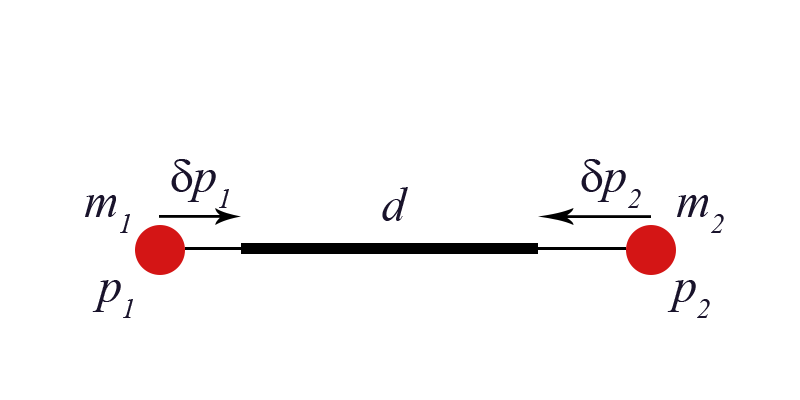
<style>
.page{position:relative;width:800px;height:400px;background:#ffffff}
.page>*{position:absolute;margin:0}
.t1{font:48px "TimesNewRomanPS-ItalicMT";color:#19132b}
.t2{font:48px "SymbolMT";color:#19132b}
</style>
<div class="page">
<p class="t1" style="left:171px;top:159px;width:58px;height:49px"><span class="t2">d</span>p1</p>
<p class="t1" style="left:581px;top:159px;width:60px;height:49px"><span class="t2">d</span>p2</p>
<p class="t1" style="left:85px;top:195px;width:45px;height:38px">m1</p>
<p class="t1" style="left:382px;top:187px;width:26px;height:34px">d</p>
<p class="t1" style="left:677px;top:195px;width:47px;height:38px">m2</p>
<p class="t1" style="left:92px;top:280px;width:41px;height:38px">p1</p>
<p class="t1" style="left:667px;top:280px;width:43px;height:38px">p2</p>
</div>
